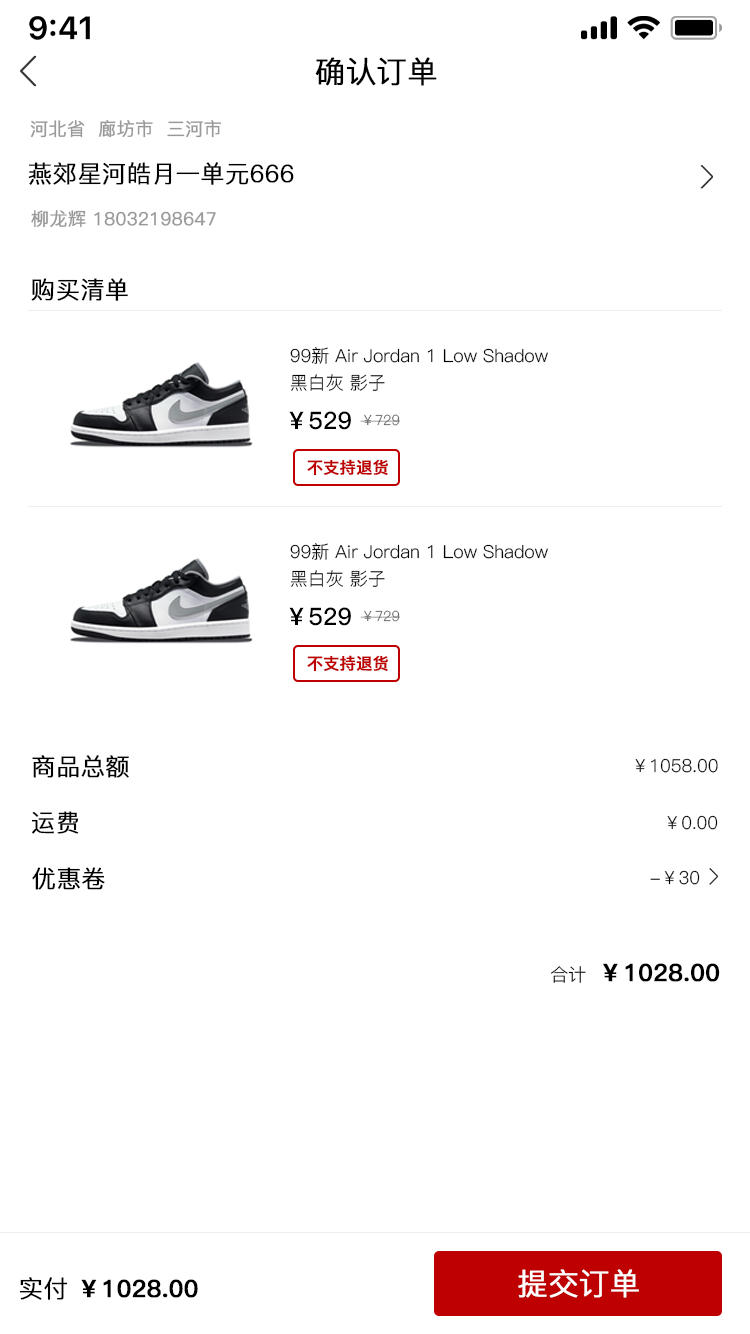
<style>
.page{position:relative;width:750px;height:1334px;background:#ffffff}
.page>*{position:absolute;margin:0}
.t1{font:30px "PingFang-SC-Regular";color:#000000;font-weight:bold}
.t2{font:18px "PingFang-SC-Regular";color:#999999;font-weight:bold}
.t3{font:24px "PingFang-SC-Regular";color:#000000;font-weight:bold}
.t4{font:18px/27px "PingFang-SC-Regular";color:#000000}
.t5{font:24px "PingFang-SC-Bold";color:#000000}
.t6{font:14px "PingFang-SC-Regular";color:#666666}
.t7{font:16px "PingFang-SC-Bold";color:#be0000;font-weight:bold}
.t8{font:18px "PingFang-SC-Regular";color:#000000}
.t9{font:24px "PingFang-SC-Bold";color:#000000;font-weight:bold}
.t10{font:30px "PingFang-SC-Regular";color:#ffffff;font-weight:bold}
</style>
<div class="page">
<p class="t1" style="left:315px;top:57px;width:122px;height:29px">确认订单</p>
<p class="t2" style="left:30px;top:120px;width:192px;height:18px">河北省  廊坊市  三河市</p>
<p class="t3" style="left:28px;top:162px;width:266px;height:23px">燕郊星河皓月一单元666</p>
<p class="t2" style="left:31px;top:210px;width:185px;height:18px">柳龙辉 18032198647</p>
<p class="t3" style="left:31px;top:278px;width:97px;height:23px">购买清单</p>
<p class="t4" style="left:290px;top:347px;width:258px;height:44px">99新 Air Jordan 1 Low Shadow<br>黑白灰 影子</p>
<p class="t5" style="left:289px;top:411px;width:62px;height:19px">￥529</p>
<p class="t6" style="left:360px;top:414px;width:40px;height:12px">￥729</p>
<p class="t7" style="left:307px;top:459px;width:81px;height:17px">不支持退货</p>
<p class="t4" style="left:290px;top:543px;width:258px;height:44px">99新 Air Jordan 1 Low Shadow<br>黑白灰 影子</p>
<p class="t5" style="left:289px;top:607px;width:62px;height:19px">￥529</p>
<p class="t6" style="left:360px;top:610px;width:40px;height:12px">￥729</p>
<p class="t7" style="left:307px;top:655px;width:81px;height:17px">不支持退货</p>
<p class="t3" style="left:32px;top:755px;width:97px;height:23px">商品总额</p>
<p class="t8" style="left:635px;top:758px;width:83px;height:15px">￥1058.00</p>
<p class="t3" style="left:31px;top:811px;width:48px;height:23px">运费</p>
<p class="t8" style="left:667px;top:815px;width:51px;height:15px">￥0.00</p>
<p class="t3" style="left:32px;top:867px;width:73px;height:23px">优惠卷</p>
<p class="t8" style="left:650px;top:870px;width:50px;height:15px">-￥30</p>
<p class="t9" style="left:551px;top:963px;width:169px;height:20px"><span class="t8">合计  </span>￥1028.00</p>
<p class="t9" style="left:19px;top:1277px;width:179px;height:23px"><span class="t3">实付 </span>￥1028.00</p>
<p class="t10" style="left:518px;top:1269px;width:121px;height:29px">提交订单</p>
</div>
